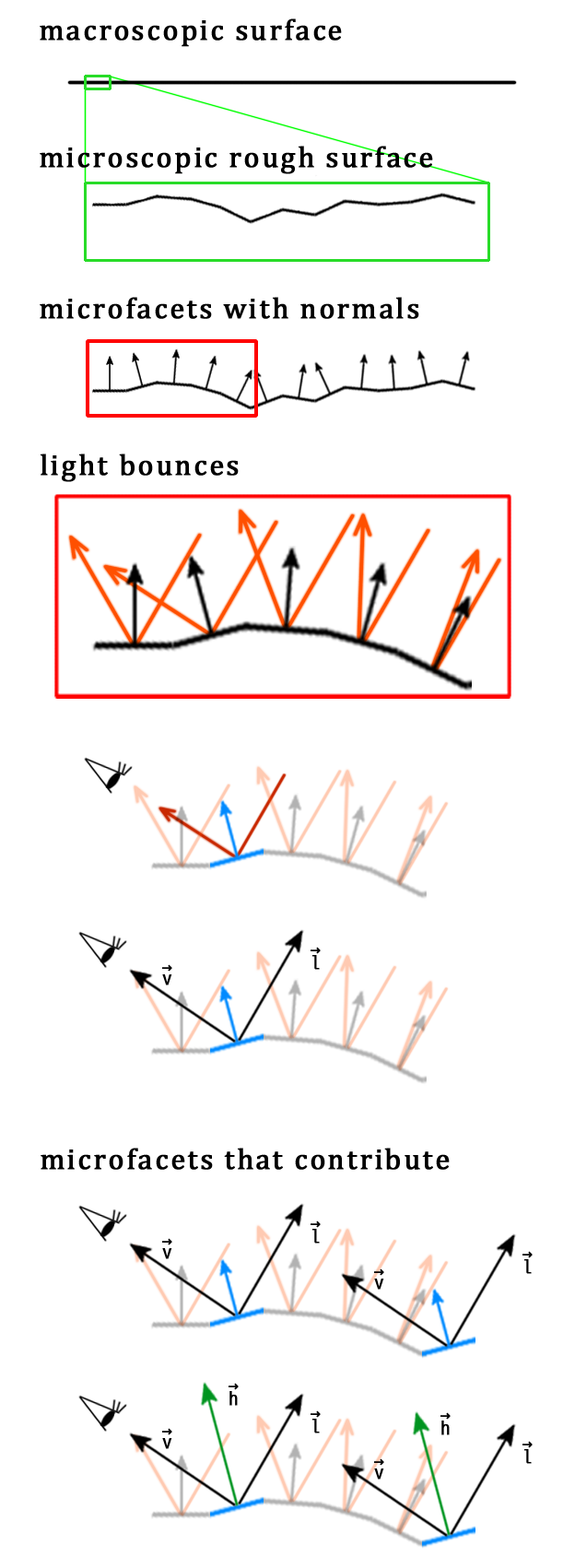
<style>
.page{position:relative;width:575px;height:1568px;background:#ffffff}
.page>*{position:absolute;margin:0}
.t1{font:29.5px "Cambria";letter-spacing:0.06em;color:#000000;font-weight:bold}
.t2{font:18.4px/12.9px "D2Coding";color:#000000;font-weight:bold}
.t3{font:18.4px/11.1px "D2Coding";color:#000000;font-weight:bold}
</style>
<div class="page">
<p class="t1" style="left:40px;top:18px;width:302px;height:29px">macroscopic surface</p>
<p class="t1" style="left:40px;top:146px;width:393px;height:28px">microscopic rough surface</p>
<p class="t1" style="left:40px;top:297px;width:379px;height:22px">microfacets with normals</p>
<p class="t1" style="left:41px;top:454px;width:198px;height:28px">light bounces</p>
<p class="t2" style="left:311px;top:947px;width:10px;height:23px">→ <br>l</p>
<p class="t3" style="left:162px;top:964px;width:10px;height:21px">→ <br>v</p>
<p class="t1" style="left:41px;top:1148px;width:409px;height:22px">microfacets that contribute</p>
<p class="t2" style="left:311px;top:1220px;width:10px;height:24px">→ <br>l</p>
<p class="t3" style="left:162px;top:1238px;width:10px;height:21px">→ <br>v</p>
<p class="t2" style="left:523px;top:1251px;width:10px;height:23px">→ <br>l</p>
<p class="t3" style="left:374px;top:1268px;width:10px;height:22px">→ <br>v</p>
<p class="t2" style="left:229px;top:1383px;width:10px;height:23px">→ <br>h</p>
<p class="t2" style="left:311px;top:1410px;width:10px;height:23px">→ <br>l</p>
<p class="t2" style="left:441px;top:1412px;width:10px;height:23px">→ <br>h</p>
<p class="t3" style="left:162px;top:1428px;width:10px;height:21px">→ <br>v</p>
<p class="t2" style="left:523px;top:1441px;width:10px;height:23px">→ <br>l</p>
<p class="t3" style="left:374px;top:1458px;width:10px;height:22px">→ <br>v</p>
</div>
